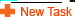
<style>
.page{position:relative;width:75px;height:17px;background:#ffffff}
.page>*{position:absolute;margin:0}
.t1{font:12px "ArialMT"}
</style>
<div class="page">
<p class="t1" style="left:21px;top:4px;width:51px;height:9px">New Task</p>
</div>
